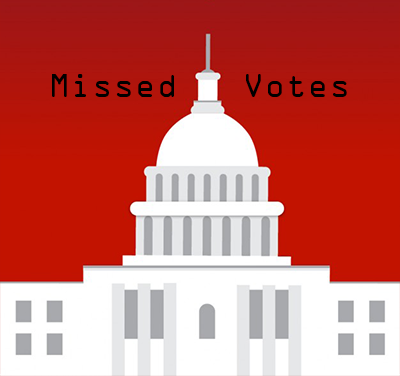
<style>
.page{position:relative;width:400px;height:376px;background:#ffffff}
.page>*{position:absolute;margin:0}
.t1{font:30px "OCRAStd";color:#000000}
.t2{font:24px "OCRAStd";color:#000000}
</style>
<div class="page">
<p class="t1" style="left:52px;top:74px;width:295px;height:23px"><span class="t2">  </span>Missed   Votes</p>
</div>
